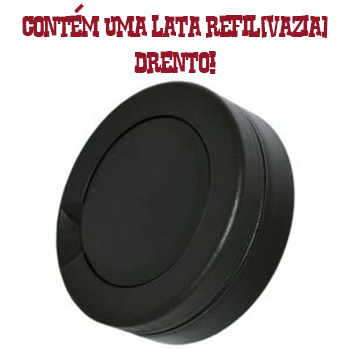
<style>
.page{position:relative;width:350px;height:350px;background:#ffffff}
.page>*{position:absolute;margin:0}
.t1{font:30px "Rustler";letter-spacing:-0.04em;color:#941729}
</style>
<div class="page">
<p class="t1" style="left:22px;top:15px;width:306px;height:59px;text-align:center">contem uma lata refil(vazia) drento!</p>
</div>
